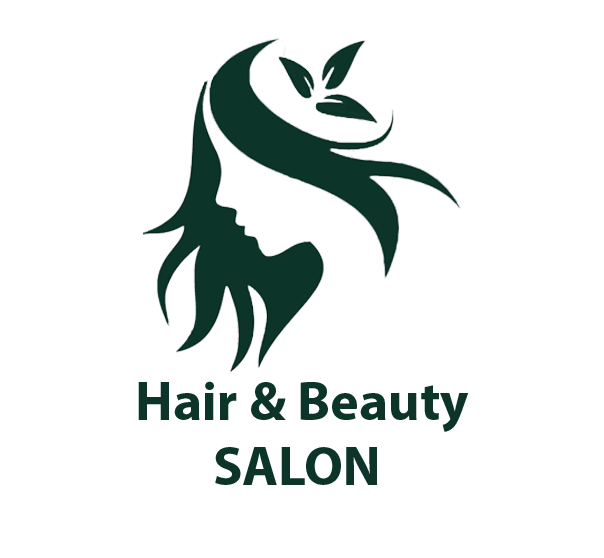
<style>
.page{position:relative;width:604px;height:558px;background:#ffffff}
.page>*{position:absolute;margin:0}
.t1{font:54.7px "MyriadPro-Bold";color:#0c3429}
</style>
<div class="page">
<p class="t1" style="left:138px;top:381px;width:331px;height:104px">Hair &amp; Beauty<br>       SALON</p>
</div>
